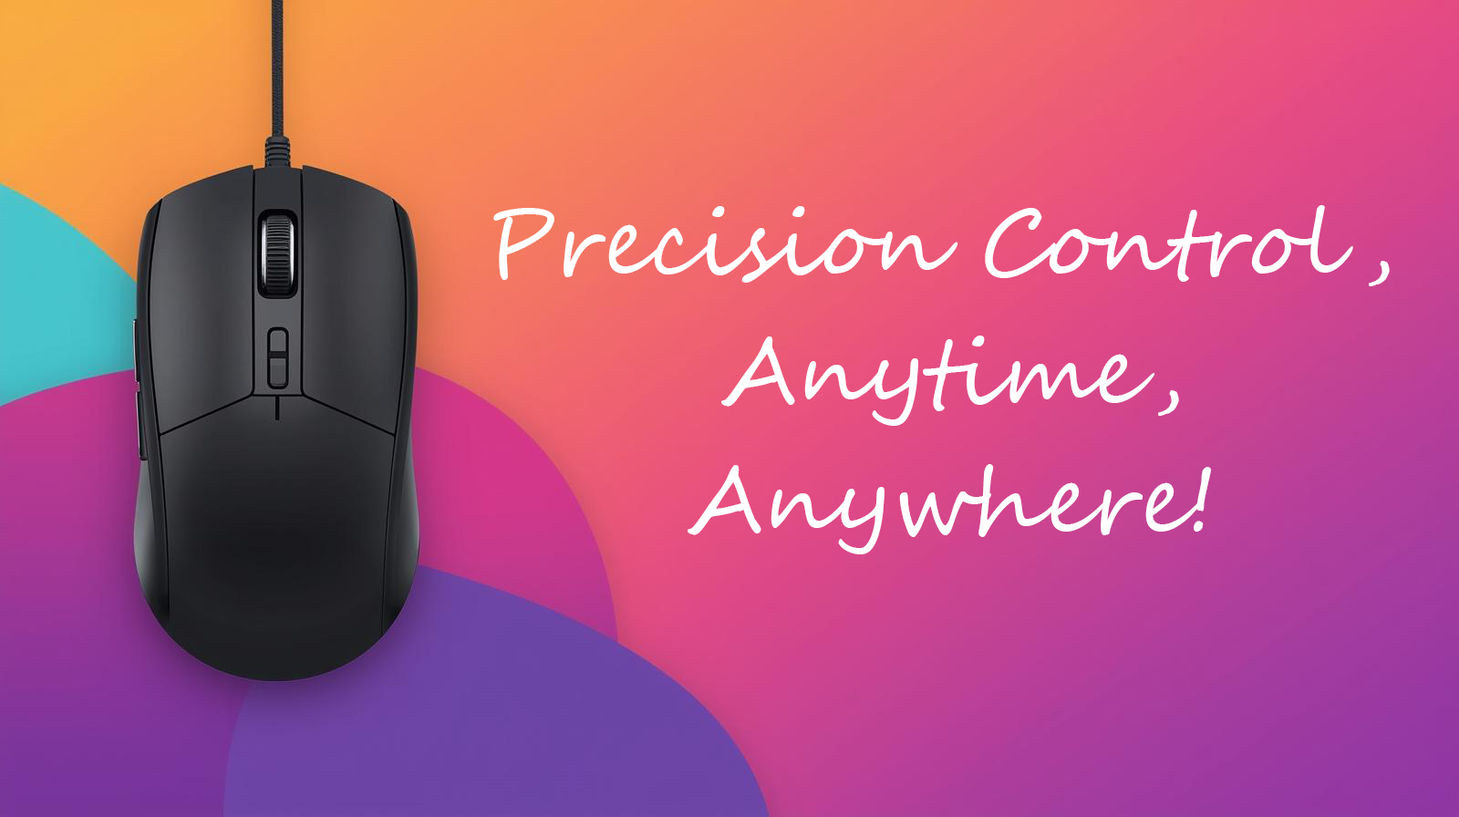
<style>
.page{position:relative;width:1459px;height:817px}
.page>*{position:absolute;margin:0}
.t1{font:91.2px "SegoeScript";color:#fefefe}
</style>
<div class="page">
<p class="t1" style="left:493px;top:205px;width:897px;height:350px;text-align:center">Precision Control, <br><br>Anytime,<br><br>Anywhere!</p>
</div>
